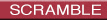
<style>
.page{position:relative;width:107px;height:20px}
.page>*{position:absolute;margin:0}
.t1{font:14px "Helvetica";color:#ffffff;scale:1.2 1}
</style>
<div class="page">
<p class="t1" style="left:10px;top:4px;width:91px;height:11px">SCRAMBLE</p>
</div>
